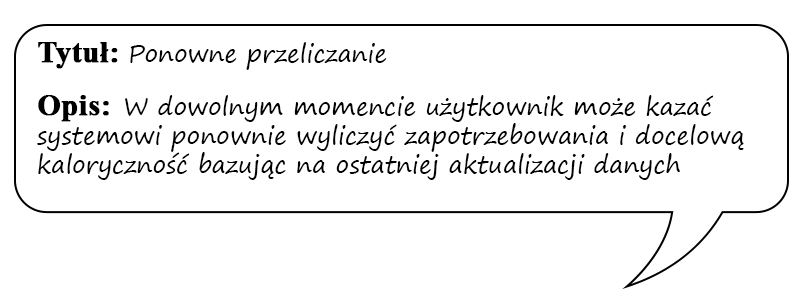
<style>
.page{position:relative;width:800px;height:307px;background:#ffffff}
.page>*{position:absolute;margin:0}
.t1{font:24px "SegoePrint";color:#000000}
.t2{font:30px "TimesNewRomanPS-BoldMT";color:#000000;font-weight:bold}
</style>
<div class="page">
<p class="t1" style="left:37px;top:42px;width:707px;height:138px"><span class="t2">Tytuł: </span>Ponowne przeliczanie<br><br><span class="t2">Opis:  </span>W dowolnym momencie użytkownik może kazać systemowi ponownie wyliczyć zapotrzebowania i docelową kaloryczność bazując na ostatniej aktualizacji danych</p>
</div>
